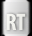
<style>
.page{position:relative;width:32px;height:36px}
.page>*{position:absolute;margin:0}
.t1{font:24px "MyriadPro-BoldCond";color:#fffff8}
</style>
<div class="page">
<p class="t1" style="left:6px;top:13px;width:20px;height:17px;opacity:0.65">RT</p>
</div>
